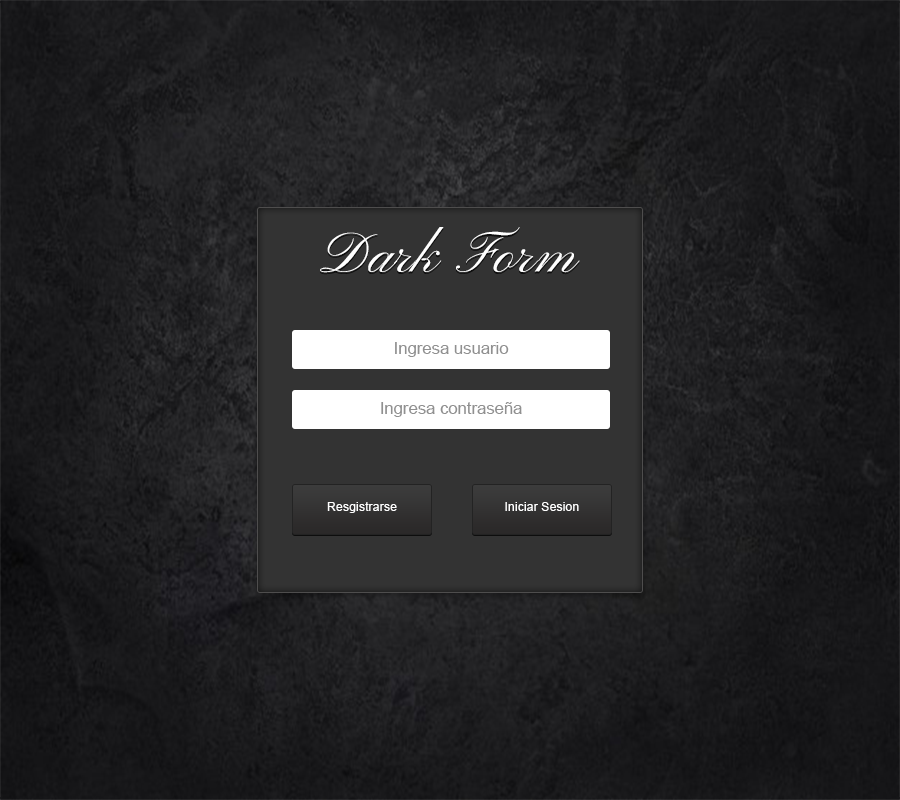
<style>
.page{position:relative;width:900px;height:800px}
.page>*{position:absolute;margin:0}
.t1{font:58.3px "PinyonScript";color:#ffffff}
.t2{font:16.7px "ArialMT";color:#909090}
.t3{font:12.5px "ArialMT";color:#ffffff}
</style>
<div class="page">
<p class="t1" style="left:320px;top:227px;width:260px;height:46px">Dark Form</p>
<p class="t2" style="left:395px;top:342px;width:114px;height:15px">Ingresa usuario</p>
<p class="t2" style="left:381px;top:402px;width:141px;height:15px">Ingresa contraseña</p>
<p class="t3" style="left:327px;top:502px;width:70px;height:11px">Resgistrarse</p>
<p class="t3" style="left:505px;top:502px;width:74px;height:9px">Iniciar Sesion</p>
</div>
